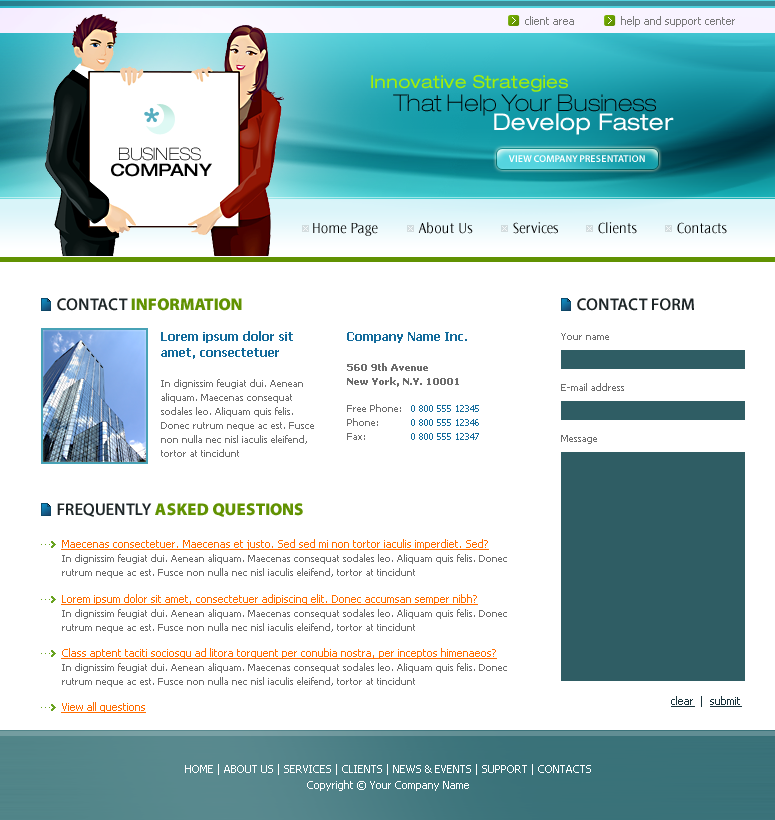
<style>
.page{position:relative;width:775px;height:820px;background:#ffffff}
.page>*{position:absolute;margin:0}
.t1{font:11px "Tahoma";color:#7b7b7b}
.t2{font:18px "HelveticaNeueLTPro-Ex";color:#a2ee09}
.t3{font:23px "HelveticaNeueLTPro-ThEx";color:#000000}
.t4{font:23px "HelveticaNeueLTPro-Ex";color:#ffffff}
.t5{font:17px/16.2px "HelveticaNeueLTPro-ThEx";color:#000000}
.t6{font:17px/16.2px "HelveticaNeueLTPro-MdEx";color:#000000}
.t7{font:10px "MyriadPro-Semibold";color:#ffffff}
.t8{font:15px "OceanSansStd-Light";color:#000000}
.t9{font:17px "MyriadPro-Black";color:#619201}
.t10{font:17px "MyriadPro-Semibold";color:#1d2527}
.t11{font:10px/14px "Tahoma";color:#6d6d6d}
.t12{font:12px/16px "Tahoma-Bold";color:#136b9b}
.t13{font:10px/14px "Tahoma-Bold";color:#6d6d6d}
.t14{font:10px "Tahoma";color:#6d6d6d}
.t15{font:10px/14px "Tahoma";color:#136b9b}
.t16{font:11px/24px "Tahoma";color:#ff6c00;text-decoration:underline}
.t17{font:11px "Tahoma";color:#ff6c00;text-decoration:underline}
.t18{font:11px "Tahoma";color:#19333b;text-decoration:underline}
.t19{font:11px "Tahoma";color:#19333b}
.t20{font:11px/16px "Tahoma";color:#ffffff}
</style>
<div class="page">
<p class="t1" style="left:525px;top:16px;width:49px;height:9px">client area</p>
<p class="t1" style="left:621px;top:16px;width:114px;height:11px">help and support center</p>
<p class="t2" style="left:371px;top:75px;width:197px;height:17px">Innovative Strategies</p>
<p class="t3" style="left:393px;top:94px;width:263px;height:22px">That Help Your Business</p>
<p class="t4" style="left:494px;top:113px;width:180px;height:22px">Develop Faster</p>
<p class="t5" style="left:111px;top:147px;width:101px;height:30px;text-align:center">BUSINESS<br> <span class="t6">COMPANY</span></p>
<p class="t7" style="left:508px;top:155px;width:137px;height:7px">VIEW COMPANY PRESENTATION</p>
<p class="t8" style="left:418px;top:222px;width:55px;height:12px">About Us</p>
<p class="t8" style="left:513px;top:222px;width:45px;height:12px">Services</p>
<p class="t8" style="left:598px;top:222px;width:39px;height:12px">Clients</p>
<p class="t8" style="left:677px;top:222px;width:50px;height:12px">Contacts</p>
<p class="t8" style="left:313px;top:223px;width:65px;height:13px">Home Page</p>
<p class="t9" style="left:57px;top:298px;width:185px;height:13px"><span class="t10">CONTACT </span>INFORMATION</p>
<p class="t10" style="left:577px;top:298px;width:117px;height:13px">CONTACT FORM</p>
<p class="t11" style="left:161px;top:331px;width:153px;height:126px"><span class="t12">Lorem ipsum dolor sit amet, consectetuer <br><br></span>In dignissim feugiat dui. Aenean aliquam. Maecenas consequat sodales leo. Aliquam quis felis. Donec rutrum neque ac est. Fusce non nulla nec nisl iaculis eleifend, tortor at tincidunt</p>
<p class="t13" style="left:347px;top:332px;width:120px;height:55px"><span class="t12">Company Name Inc.<br><br></span>560 9th Avenue<br>New York, N.Y. 10001</p>
<p class="t14" style="left:561px;top:333px;width:48px;height:7px">Your name</p>
<p class="t14" style="left:561px;top:383px;width:63px;height:8px">E-mail address</p>
<p class="t11" style="left:347px;top:404px;width:54px;height:36px">Free Phone:<br>Phone:<br>Fax:</p>
<p class="t15" style="left:411px;top:405px;width:68px;height:35px;text-align:right">0 800 555 12345<br>0 800 555 12346<br>0 800 555 12347</p>
<p class="t14" style="left:561px;top:435px;width:36px;height:9px">Message</p>
<p class="t9" style="left:57px;top:503px;width:246px;height:14px"><span class="t10">FREQUENTLY </span>ASKED QUESTIONS</p>
<p class="t11" style="left:61px;top:539px;width:446px;height:39px"><span class="t16">Maecenas consectetuer. Maecenas et justo. Sed sed mi non tortor iaculis imperdiet. Sed?<br></span>In dignissim feugiat dui. Aenean aliquam. Maecenas consequat sodales leo. Aliquam quis felis. Donec rutrum neque ac est. Fusce non nulla nec nisl iaculis eleifend, tortor at tincidunt</p>
<p class="t11" style="left:61px;top:594px;width:446px;height:39px"><span class="t16">Lorem ipsum dolor sit amet, consectetuer adipiscing elit. Donec accumsan semper nibh?<br></span>In dignissim feugiat dui. Aenean aliquam. Maecenas consequat sodales leo. Aliquam quis felis. Donec rutrum neque ac est. Fusce non nulla nec nisl iaculis eleifend, tortor at tincidunt</p>
<p class="t11" style="left:61px;top:648px;width:446px;height:39px"><span class="t16">Class aptent taciti sociosqu ad litora torquent per conubia nostra, per inceptos himenaeos?<br></span>In dignissim feugiat dui. Aenean aliquam. Maecenas consequat sodales leo. Aliquam quis felis. Donec rutrum neque ac est. Fusce non nulla nec nisl iaculis eleifend, tortor at tincidunt</p>
<p class="t17" style="left:61px;top:702px;width:85px;height:11px">View all questions</p>
<p class="t18" style="left:671px;top:696px;width:71px;height:11px">clear<span class="t19">  |  </span>submit</p>
<p class="t20" style="left:185px;top:764px;width:406px;height:27px;text-align:center">HOME | ABOUT US | SERVICES | CLIENTS | NEWS &amp; EVENTS | SUPPORT | CONTACTS<br>Copyright © Your Company Name</p>
</div>
